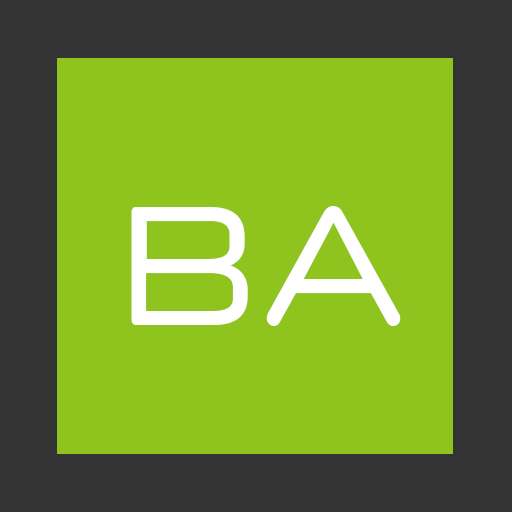
<style>
.page{position:relative;width:512px;height:512px;background:#8fc41f}
.page>*{position:absolute;margin:0}
.t1{font:169px "NeuropolXFree";color:#ffffff;scale:0.83 1}
</style>
<div class="page">
<p class="t1" style="left:131px;top:206px;width:270px;height:120px">BA</p>
</div>
